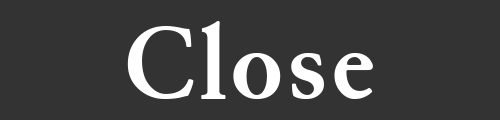
<style>
.page{position:relative;width:500px;height:120px;background:#333333}
.page>*{position:absolute;margin:0}
.t1{font:105.8px "Junicode-Bold";letter-spacing:0.04em;color:#ffffff}
</style>
<div class="page">
<p class="t1" style="left:127px;top:21px;width:246px;height:78px">Close</p>
</div>
